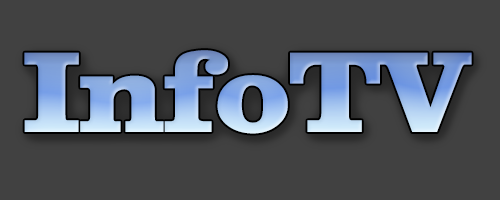
<style>
.page{position:relative;width:500px;height:200px;background:#414141}
.page>*{position:absolute;margin:0}
.t1{font:110px "Clarendon"}
</style>
<div class="page">
<p class="t1" style="left:24px;top:50px;width:448px;height:84px">InfoTV</p>
</div>
